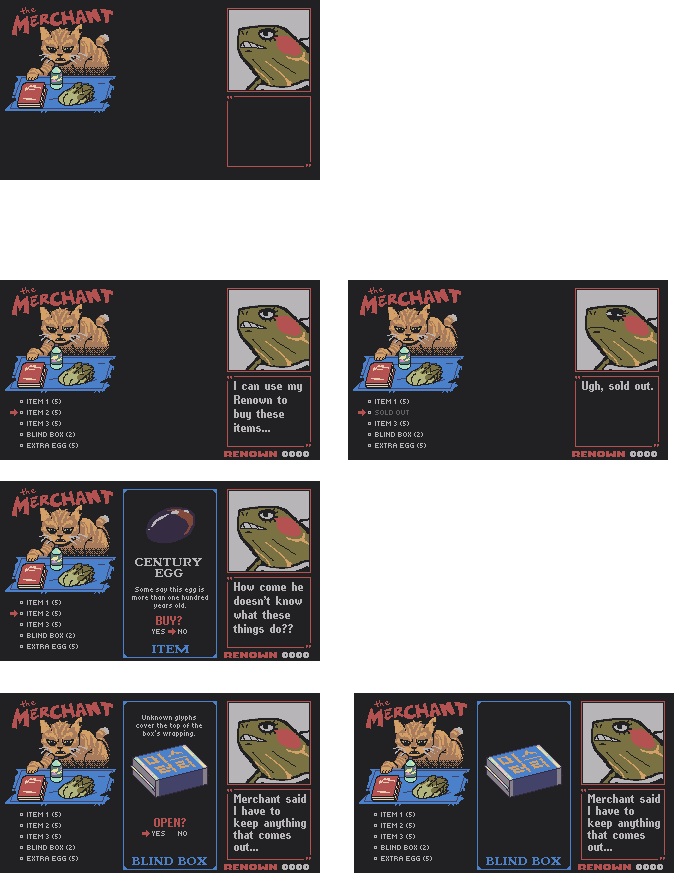
<style>
.page{position:relative;width:674px;height:873px;background:#ffffff}
.page>*{position:absolute;margin:0}
.t1{font:16px/14px "PixelPurl";color:#b8b5b9}
.t2{font:16px "PixelPurl";color:#b8b5b9}
.t3{font:8px "Tiny5-Regular";color:#b8b5b9}
.t4{font:8px "Tiny5-Regular";color:#646365}
.t5{font:11px/11px "NotJamOldStyle11";color:#b8b5b9}
.t6{font:8px/8px "Tiny5-Regular";color:#b8b5b9}
.t7{font:16px "PixelPurl";color:#b45252}
.t8{font:11px "NotJamOldStyle11";color:#4b80ca}
.t9{font:16px/12px "PixelPurl";color:#b8b5b9}
</style>
<div class="page">
<p class="t1" style="left:234px;top:381px;width:68px;height:51px">I can use my Renown to buy these items...</p>
<p class="t2" style="left:582px;top:381px;width:71px;height:11px">Ugh, sold out.</p>
<p class="t3" style="left:27px;top:399px;width:34px;height:5px">ITEM 1 (5)</p>
<p class="t3" style="left:375px;top:399px;width:34px;height:5px">ITEM 1 (5)</p>
<p class="t3" style="left:27px;top:410px;width:34px;height:5px">ITEM 2 (5)</p>
<p class="t4" style="left:375px;top:410px;width:34px;height:5px">SOLD OUT</p>
<p class="t3" style="left:27px;top:421px;width:34px;height:5px">ITEM 3 (5)</p>
<p class="t3" style="left:375px;top:421px;width:34px;height:5px">ITEM 3 (5)</p>
<p class="t3" style="left:27px;top:432px;width:48px;height:5px">BLIND BOX (2)</p>
<p class="t3" style="left:375px;top:432px;width:48px;height:5px">BLIND BOX (2)</p>
<p class="t3" style="left:27px;top:443px;width:51px;height:5px">EXTRA EGG (5)</p>
<p class="t3" style="left:375px;top:443px;width:51px;height:5px">EXTRA EGG (5)</p>
<p class="t5" style="left:135px;top:558px;width:67px;height:19px;text-align:center">CENTURY EGG</p>
<p class="t1" style="left:233px;top:582px;width:70px;height:53px">How come he doesn't know what these things do??</p>
<p class="t6" style="left:132px;top:586px;width:76px;height:23px;text-align:center">Some say this egg is more than one hundred years old.</p>
<p class="t3" style="left:27px;top:600px;width:34px;height:5px">ITEM 1 (5)</p>
<p class="t3" style="left:27px;top:611px;width:34px;height:5px">ITEM 2 (5)</p>
<p class="t7" style="left:156px;top:616px;width:26px;height:9px">BUY?</p>
<p class="t3" style="left:27px;top:622px;width:34px;height:5px">ITEM 3 (5)</p>
<p class="t3" style="left:152px;top:629px;width:13px;height:5px">YES</p>
<p class="t3" style="left:178px;top:629px;width:9px;height:5px">NO</p>
<p class="t3" style="left:27px;top:633px;width:48px;height:5px">BLIND BOX (2)</p>
<p class="t3" style="left:27px;top:644px;width:51px;height:5px">EXTRA EGG (5)</p>
<p class="t8" style="left:152px;top:645px;width:37px;height:8px">ITEM</p>
<p class="t6" style="left:136px;top:715px;width:66px;height:22px;text-align:center">Unknown glyphs cover the top of the box’s wrapping.</p>
<p class="t9" style="left:233px;top:794px;width:73px;height:57px">Merchant said I have to keep anything that comes out...</p>
<p class="t9" style="left:587px;top:794px;width:73px;height:57px">Merchant said I have to keep anything that comes out...</p>
<p class="t3" style="left:27px;top:812px;width:34px;height:5px">ITEM 1 (5)</p>
<p class="t7" style="left:154px;top:818px;width:32px;height:9px">OPEN?</p>
<p class="t3" style="left:381px;top:812px;width:34px;height:5px">ITEM 1 (5)</p>
<p class="t3" style="left:27px;top:823px;width:34px;height:5px">ITEM 2 (5)</p>
<p class="t3" style="left:152px;top:831px;width:13px;height:5px">YES</p>
<p class="t3" style="left:178px;top:831px;width:9px;height:5px">NO</p>
<p class="t3" style="left:381px;top:823px;width:34px;height:5px">ITEM 2 (5)</p>
<p class="t3" style="left:27px;top:834px;width:34px;height:5px">ITEM 3 (5)</p>
<p class="t3" style="left:27px;top:845px;width:48px;height:5px">BLIND BOX (2)</p>
<p class="t3" style="left:381px;top:834px;width:34px;height:5px">ITEM 3 (5)</p>
<p class="t3" style="left:381px;top:845px;width:48px;height:5px">BLIND BOX (2)</p>
<p class="t3" style="left:27px;top:856px;width:51px;height:5px">EXTRA EGG (5)</p>
<p class="t8" style="left:132px;top:857px;width:75px;height:8px">BLIND BOX</p>
<p class="t3" style="left:381px;top:856px;width:51px;height:5px">EXTRA EGG (5)</p>
<p class="t8" style="left:486px;top:857px;width:75px;height:8px">BLIND BOX</p>
</div>
